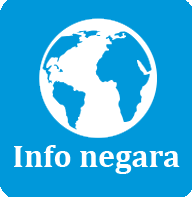
<style>
.page{position:relative;width:192px;height:197px;background:#0098da}
.page>*{position:absolute;margin:0}
.t1{font:32px "Cambria-Bold";color:#ffffff}
</style>
<div class="page">
<p class="t1" style="left:14px;top:145px;width:166px;height:29px">Info negara</p>
</div>
